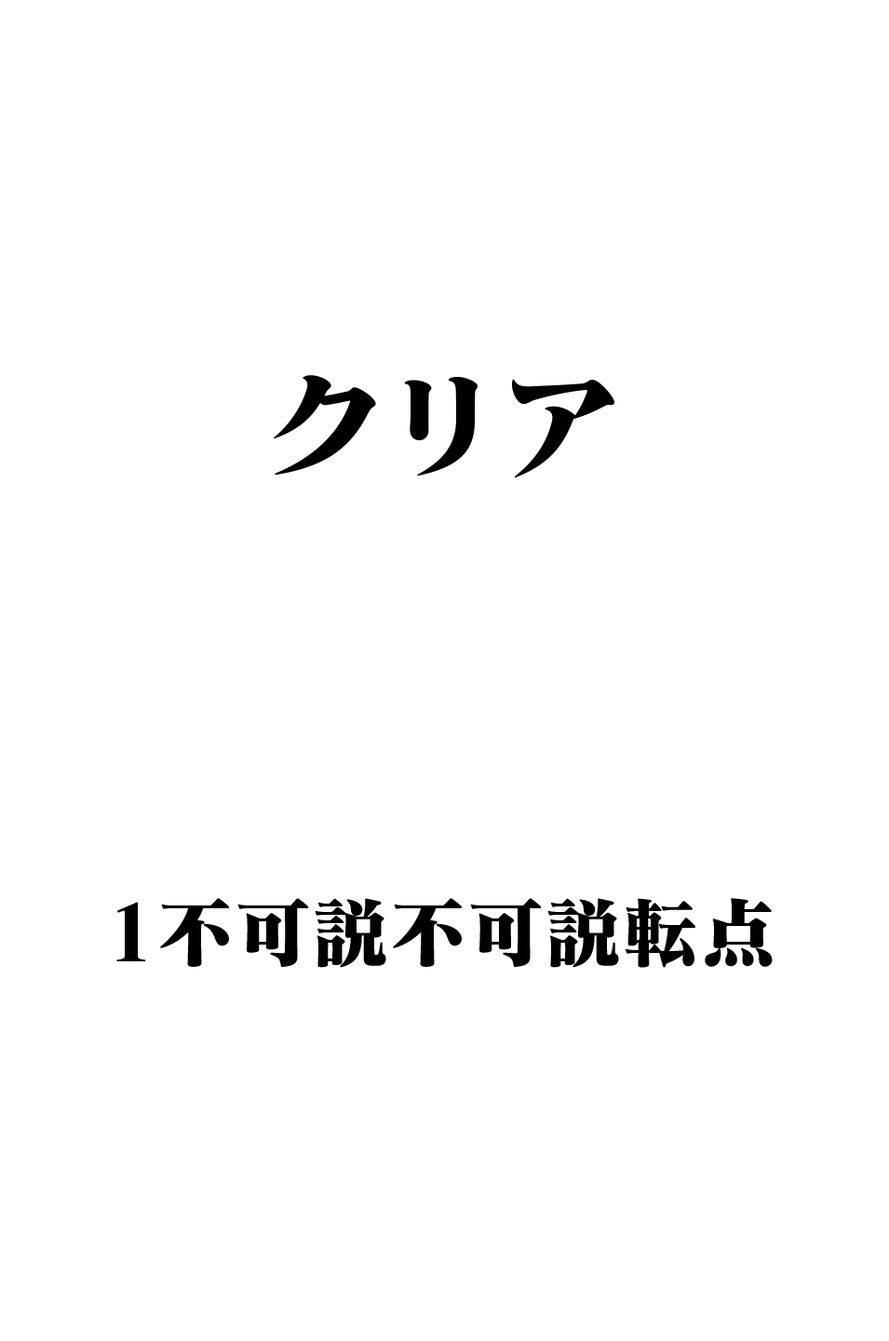
<style>
.page{position:relative;width:889px;height:1341px;background:#ffffff}
.page>*{position:absolute;margin:0}
.t1{font:116.4px "MatissePro-EB";color:#000000}
.t2{font:77.6px "MatissePro-EB";color:#000000}
</style>
<div class="page">
<p class="t1" style="left:274px;top:375px;width:340px;height:103px">クリア</p>
<p class="t2" style="left:116px;top:898px;width:657px;height:70px">1不可説不可説転点</p>
</div>
